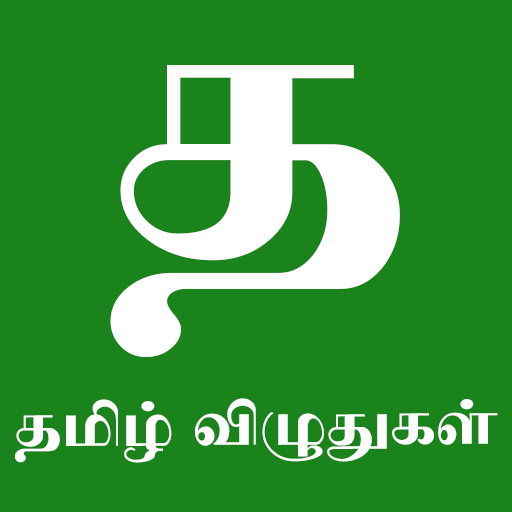
<style>
.page{position:relative;width:512px;height:512px;background:#1a831c}
.page>*{position:absolute;margin:0}
.t1{font:400px "TAU-Kabilar";color:#ffffff}
.t2{font:64px "TAU-Kabilar";color:#ffffff;scale:0.97 1}
</style>
<div class="page">
<p class="t1" style="left:110px;top:65px;width:290px;height:292px">த</p>
<p class="t2" style="left:15px;top:398px;width:483px;height:65px">தமிழ் விழுதுகள்</p>
</div>
